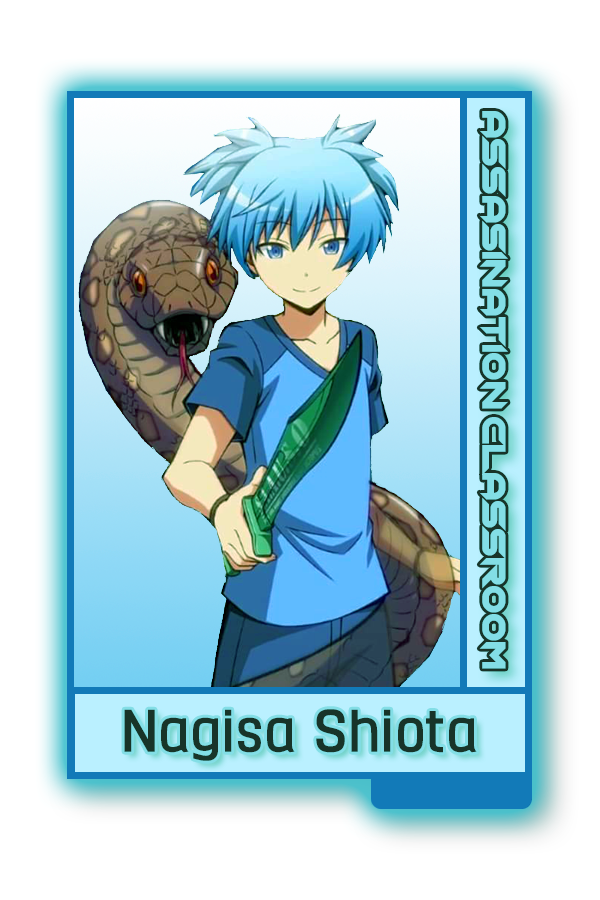
<style>
.page{position:relative;width:600px;height:900px;background:#ffffff}
.page>*{position:absolute;margin:0}
.t1{font:34px "Chopsic";color:#83dee6}
.t2{font:66.7px "Hurufo&NumeroBold";color:#252525}
</style>
<div class="page">
<p class="t1" style="left:479px;top:111px;width:29px;height:558px;rotate:90deg">Assasination Classroom</p>
<p class="t2" style="left:124px;top:709px;width:353px;height:52px">Nagisa Shiota</p>
</div>
